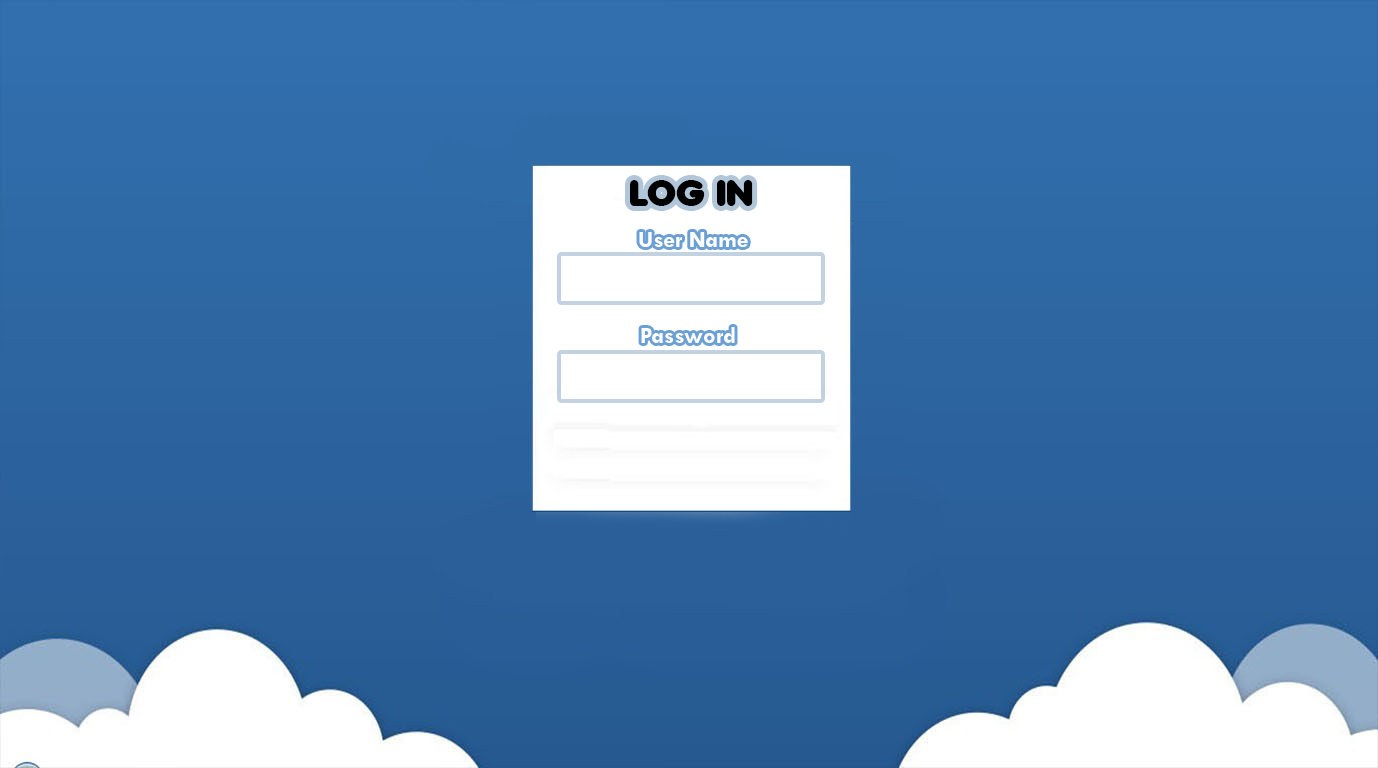
<style>
.page{position:relative;width:1378px;height:768px}
.page>*{position:absolute;margin:0}
.t1{font:36px "Valken";color:#000000}
.t2{font:24px "TwCenMT-Bold";color:#ffffff}
</style>
<div class="page">
<p class="t1" style="left:630px;top:180px;width:123px;height:26px">LOG IN</p>
<p class="t2" style="left:639px;top:232px;width:109px;height:15px">User Name</p>
<p class="t2" style="left:641px;top:327px;width:94px;height:16px">Password</p>
</div>
